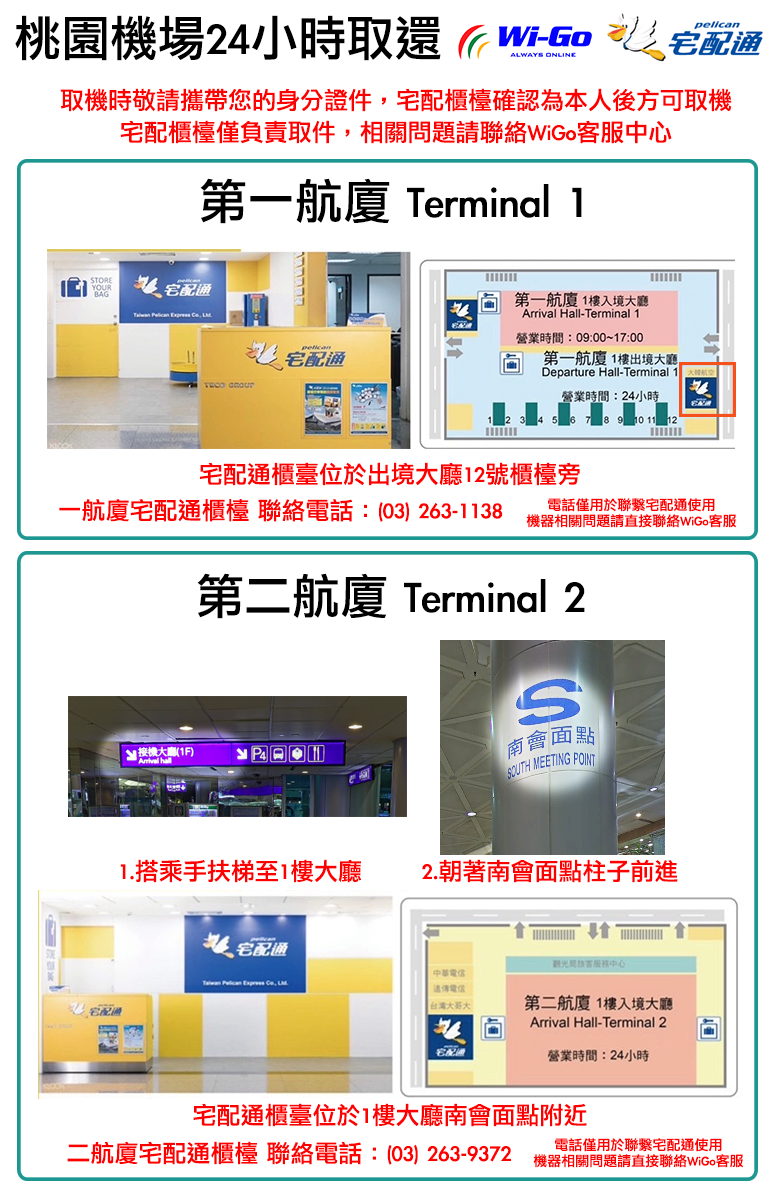
<style>
.page{position:relative;width:772px;height:1200px;background:#ffffff}
.page>*{position:absolute;margin:0}
.t1{font:48px "LiGothicMed";color:#000000}
.t2{font:24px/32px "LiGothicMed";color:#ff0000}
.t3{font:24px "LiGothicMed";color:#ff0000}
.t4{font:14px/16px "LiGothicMed";color:#ff0000}
</style>
<div class="page">
<p class="t1" style="left:15px;top:15px;width:426px;height:46px">桃園機場24小時取還</p>
<p class="t2" style="left:60px;top:88px;width:672px;height:56px;text-align:center">取機時敬請攜帶您的身分證件，宅配櫃檯確認為本人後方可取機<br>宅配櫃檯僅負責取件，相關問題請聯絡WiGo客服中心</p>
<p class="t1" style="left:200px;top:178px;width:382px;height:46px">第一航廈 Terminal 1</p>
<p class="t3" style="left:199px;top:462px;width:381px;height:24px">宅配通櫃臺位於出境大廳12號櫃檯旁</p>
<p class="t3" style="left:59px;top:499px;width:444px;height:23px">一航廈宅配通櫃檯 聯絡電話：(03) 263-1138</p>
<p class="t4" style="left:526px;top:498px;width:211px;height:30px;text-align:center">電話僅用於聯繫宅配通使用<br>機器相關問題請直接聯絡WiGo客服</p>
<p class="t1" style="left:197px;top:573px;width:388px;height:46px">第二航廈 Terminal 2</p>
<p class="t3" style="left:120px;top:859px;width:241px;height:24px">1.搭乘手扶梯至1樓大廳</p>
<p class="t3" style="left:422px;top:859px;width:256px;height:24px">2.朝著南會面點柱子前進</p>
<p class="t3" style="left:193px;top:1103px;width:394px;height:24px">宅配通櫃臺位於1樓大廳南會面點附近</p>
<p class="t3" style="left:67px;top:1141px;width:444px;height:24px">二航廈宅配通櫃檯 聯絡電話：(03) 263-9372</p>
<p class="t4" style="left:533px;top:1138px;width:211px;height:30px;text-align:center">電話僅用於聯繫宅配通使用<br>機器相關問題請直接聯絡WiGo客服</p>
</div>
